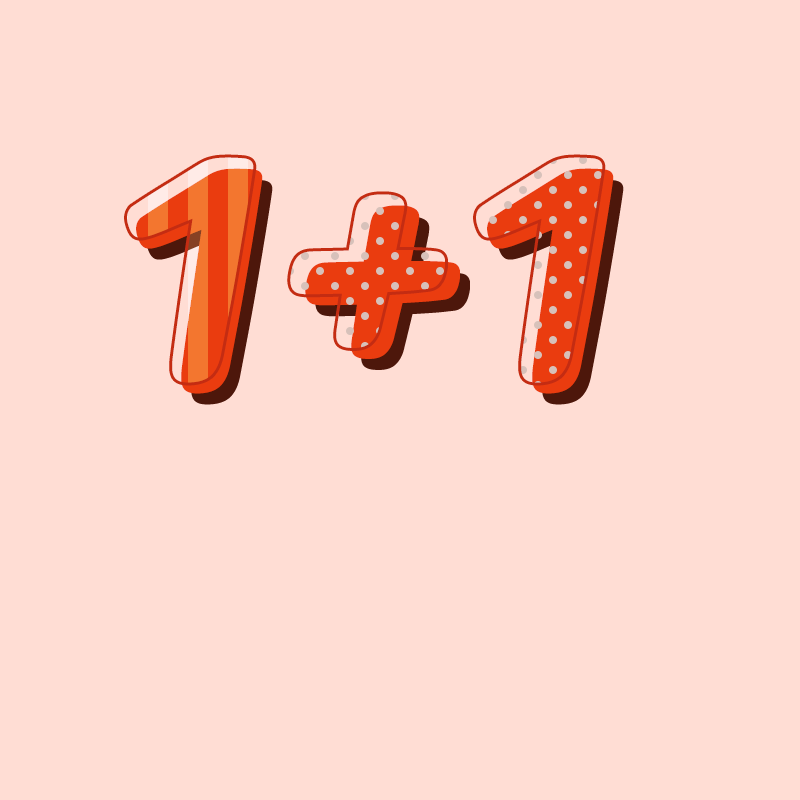
<style>
.page{position:relative;width:800px;height:800px;background:#ffddd4}
.page>*{position:absolute;margin:0}
.t1{font:300px "MaplestoryBold";font-style:italic}
.t2{font:300px "MaplestoryBold";color:#ea3c0f;font-style:italic}
</style>
<div class="page">
<p class="t1" style="left:136px;top:168px;width:127px;height:226px">1</p>
<p class="t2" style="left:487px;top:168px;width:127px;height:226px">1</p>
<p class="t2" style="left:305px;top:205px;width:155px;height:154px">+</p>
</div>
